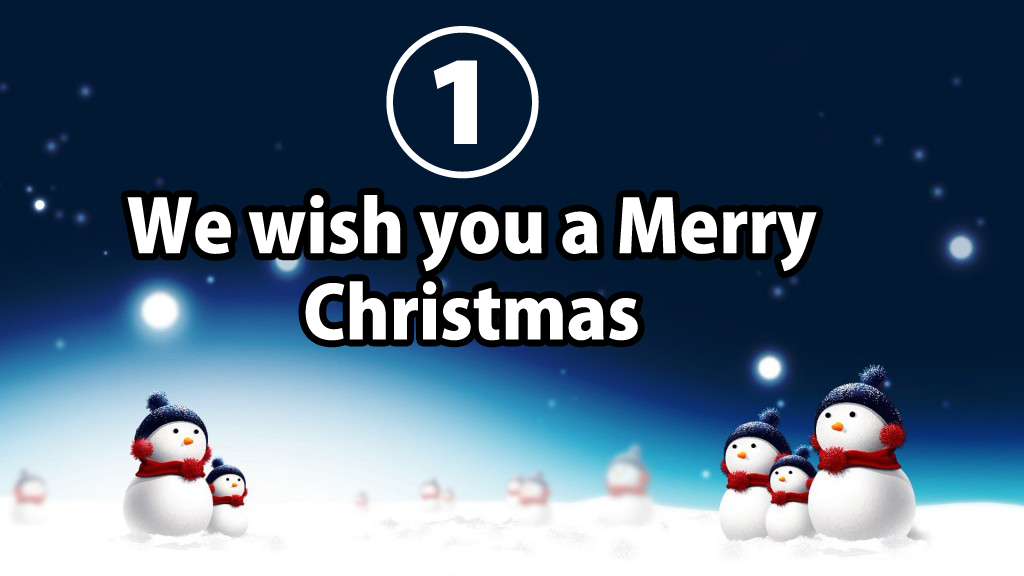
<style>
.page{position:relative;width:1024px;height:576px;background:#011933}
.page>*{position:absolute;margin:0}
.t1{font:160px "KozGoPr6N-Heavy";color:#ffffff}
.t2{font:72px "KozGoPr6N-Heavy";color:#ffffff}
</style>
<div class="page">
<p class="t1" style="left:386px;top:26px;width:153px;height:153px">①</p>
<p class="t2" style="left:127px;top:195px;width:690px;height:146px;text-align:center">We wish you a Merry Christmas</p>
</div>
